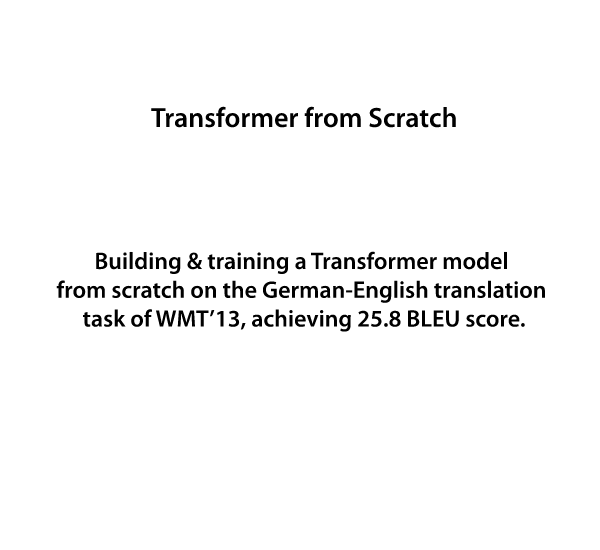
<style>
.page{position:relative;width:600px;height:550px;background:#ffffff}
.page>*{position:absolute;margin:0}
.t1{font:28px "MyriadPro-Semibold";color:#000000}
.t2{font:24px "MyriadPro-Semibold";color:#000000}
</style>
<div class="page">
<p class="t1" style="left:151px;top:106px;width:305px;height:22px">Transformer from Scratch</p>
<p class="t2" style="left:56px;top:251px;width:489px;height:81px;text-align:center">Building &amp; training a Transformer model <br>from scratch on the German-English translation <br>task of WMT’13, achieving 25.8 BLEU score.</p>
</div>
